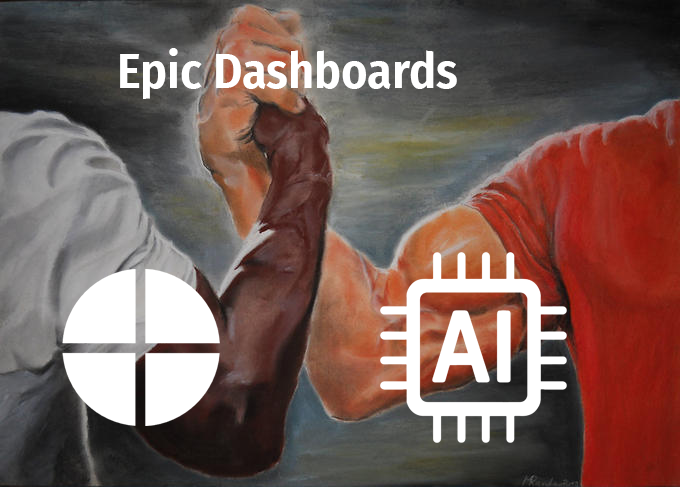
<style>
.page{position:relative;width:680px;height:487px}
.page>*{position:absolute;margin:0}
.t1{font:50px "FiraSansCondensed-SemiBold";color:#ffffff}
</style>
<div class="page">
<p class="t1" style="left:120px;top:48px;width:337px;height:51px">Epic Dashboards</p>
</div>
